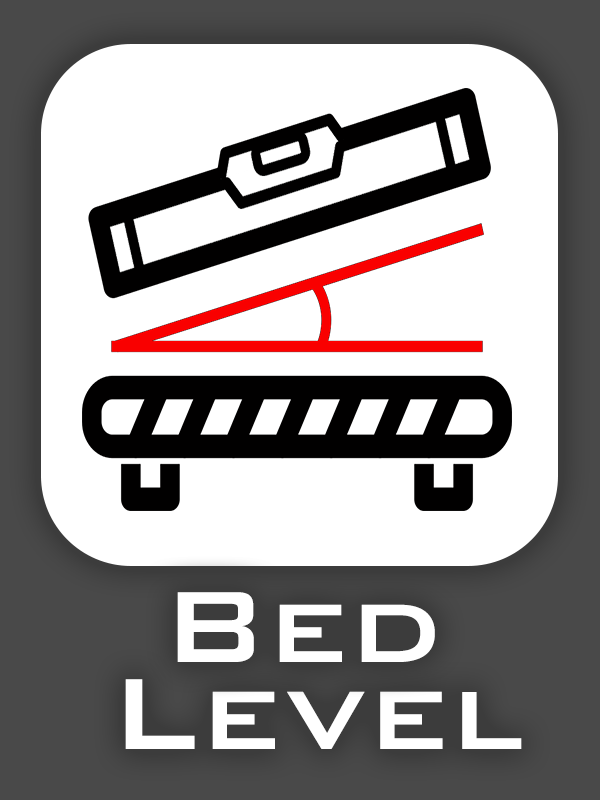
<style>
.page{position:relative;width:600px;height:800px;background:#ffffff}
.page>*{position:absolute;margin:0}
.t1{font:135px "BankGothicBT-Medium";color:#ffffff}
</style>
<div class="page">
<p class="t1" style="left:177px;top:592px;width:258px;height:70px">Bed</p>
<p class="t1" style="left:125px;top:679px;width:397px;height:70px">Level</p>
</div>
